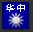
<style>
.page{position:relative;width:33px;height:32px;background:#000090}
.page>*{position:absolute;margin:0}
.t1{font:10.4px "SimSun";color:#ffffff}
</style>
<div class="page">
<p class="t1" style="left:6px;top:4px;width:19px;height:8px">华中</p>
</div>
